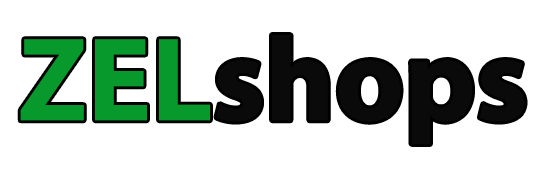
<style>
.page{position:relative;width:544px;height:184px;background:#ffffff}
.page>*{position:absolute;margin:0}
.t1{font:120px "MyriadPro-Bold";color:#0a0a0a}
.t2{font:120px "MyriadPro-Bold";color:#08992d}
</style>
<div class="page">
<p class="t1" style="left:20px;top:35px;width:505px;height:109px"><span class="t2">ZEL</span>shops</p>
</div>
